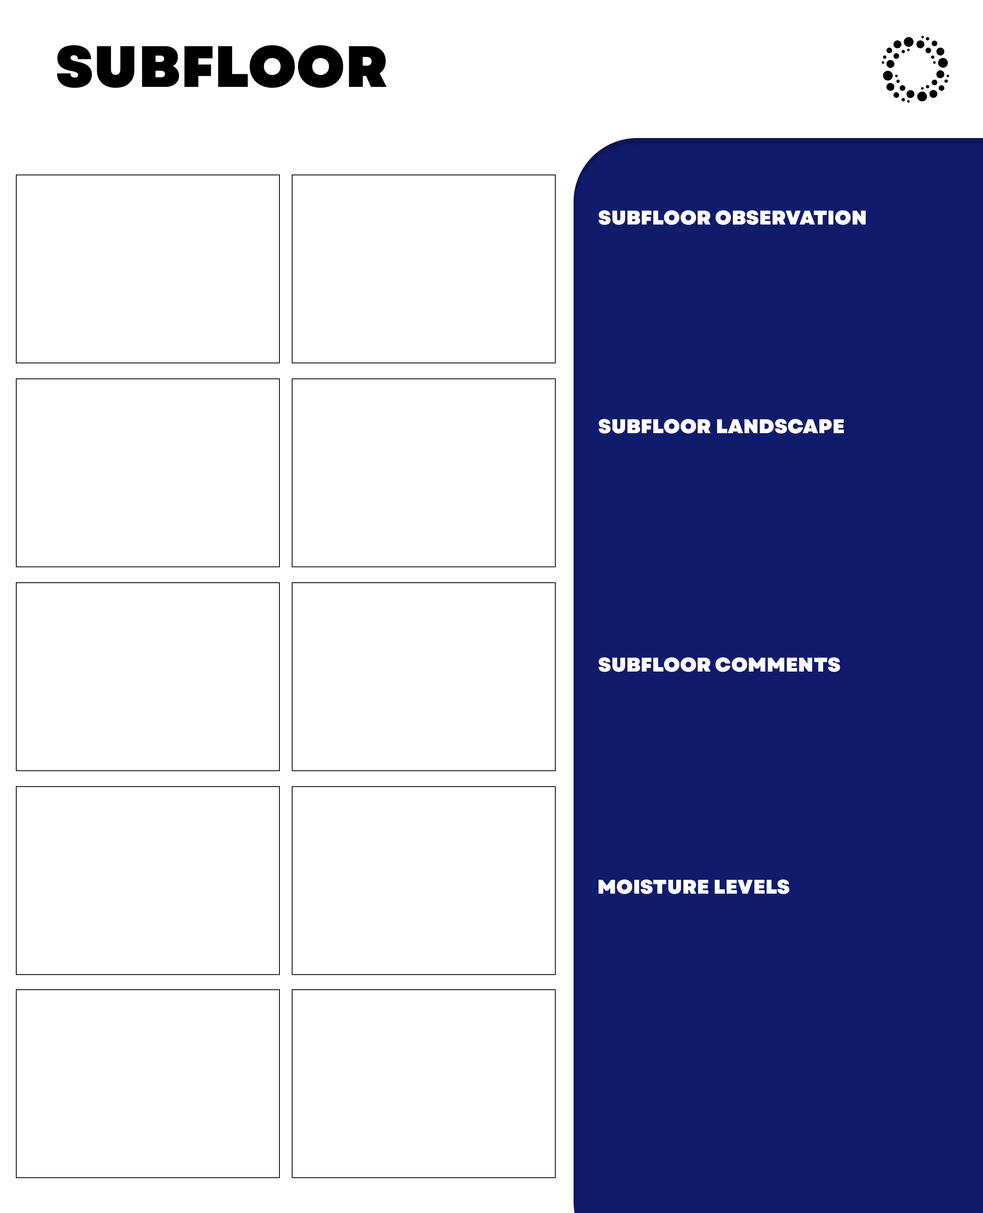
<style>
.page{position:relative;width:983px;height:1213px;background:#ffffff}
.page>*{position:absolute;margin:0}
.t1{font:58.3px "Garet-Heavy";letter-spacing:0.005em;color:#000000}
.t2{font:19.8px "Garet-Heavy";letter-spacing:0.005em;color:#ffffff}
</style>
<div class="page">
<p class="t1" style="left:57px;top:45px;width:330px;height:43px">SUBFLOOR</p>
<p class="t2" style="left:599px;top:210px;width:267px;height:15px">SUBFLOOR OBSERVATION</p>
<p class="t2" style="left:599px;top:419px;width:245px;height:14px">SUBFLOOR LANDSCAPE</p>
<p class="t2" style="left:599px;top:657px;width:242px;height:15px">SUBFLOOR COMMENTS</p>
<p class="t2" style="left:599px;top:879px;width:191px;height:15px">MOISTURE LEVELS</p>
</div>
